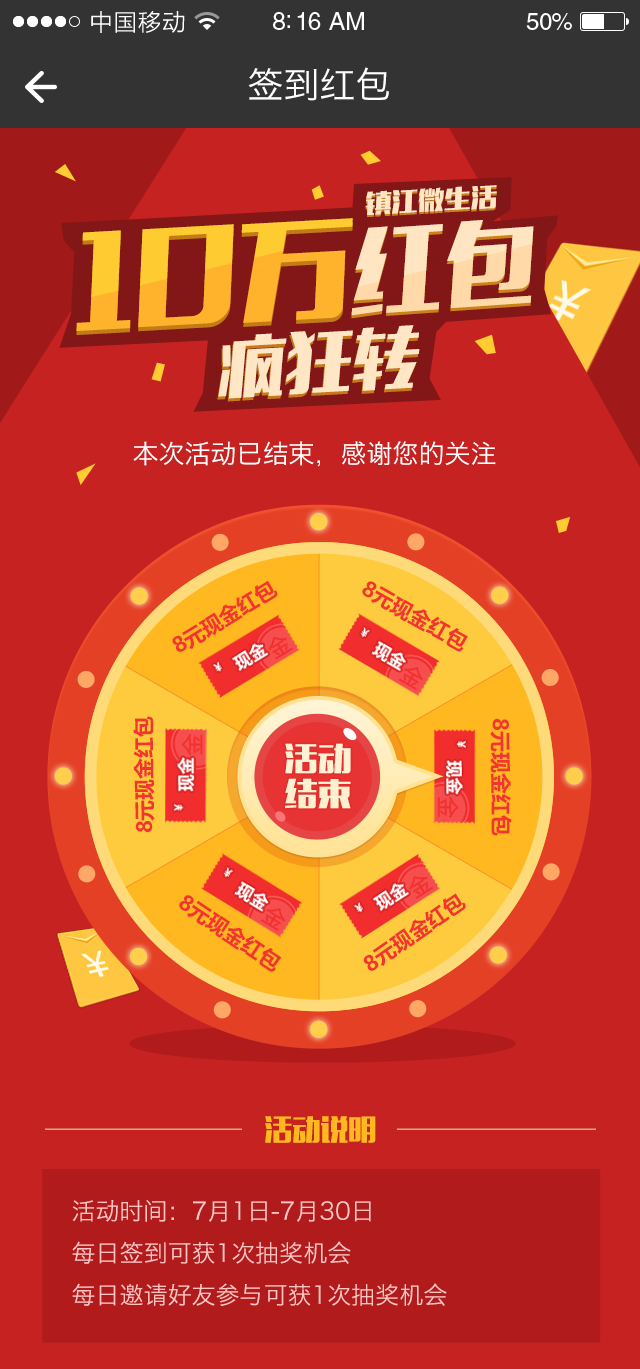
<style>
.page{position:relative;width:640px;height:1369px;background:#c72222}
.page>*{position:absolute;margin:0}
.t1{font:23px "STHeitiSC-Light";letter-spacing:-0.02em;color:#ffffff}
.t2{font:25px "HelveticaLTStd-Roman";letter-spacing:-0.02em;color:#ffffff}
.t3{font:24px "HelveticaLTStd-Roman";letter-spacing:-0.02em;color:#ffffff}
.t4{font:36px "HiraginoSansGB-W3";color:#ffffff}
.t5{font:24.6px "MFLiHei_Noncommercial-Regular";color:#ffe7c6;scale:1.08 1}
.t6{font:24.6px "MFLiHei_Noncommercial-Regular";scale:1.08 1}
.t7{font:108px "MFLiHei_Noncommercial-Regular";scale:1.08 1}
.t8{font:92.4px "MFLiHei_Noncommercial-Regular"}
.t9{font:66.7px "MFLiHei_Noncommercial-Regular";color:#ffe7c5}
.t10{font:26px "HiraginoSansGB-W3";color:#ffffff}
.t11{font:21px "MicrosoftYaHeiUI-Bold";color:#f3352f}
.t12{font:31.2px/35px "MFLiHei_Noncommercial-Regular";color:#fff0d1;scale:1.08 1}
.t13{font:28px "MFLiHei_Noncommercial-Regular";color:#ffb820}
.t14{font:24px "HiraginoSansGB-W3";color:#ffc5c5}
</style>
<div class="page">
<p class="t1" style="left:91px;top:11px;width:94px;height:22px">中国移动</p>
<p class="t2" style="left:273px;top:12px;width:91px;height:18px">8:16 AM</p>
<p class="t3" style="left:526px;top:13px;width:46px;height:17px">50%</p>
<p class="t4" style="left:248px;top:67px;width:141px;height:34px">签到红包</p>
<p class="t5" style="left:365px;top:185px;width:132px;height:31px;rotate:-3deg">镇江微生活</p>
<p class="t6" style="left:365px;top:187px;width:132px;height:31px;rotate:-3deg">镇江微生活</p>
<p class="t7" style="left:76px;top:222px;width:277px;height:113px;rotate:-3deg">10万</p>
<p class="t7" style="left:76px;top:218px;width:277px;height:113px;rotate:-3deg">10万</p>
<p class="t8" style="left:351px;top:220px;width:183px;height:96px;rotate:-4deg">红包</p>
<p class="t8" style="left:351px;top:223px;width:183px;height:96px;rotate:-4deg">红包</p>
<p class="t9" style="left:217px;top:328px;width:202px;height:74px;rotate:-3deg">疯狂转</p>
<p class="t9" style="left:218px;top:325px;width:202px;height:74px;rotate:-3deg">疯狂转</p>
<p class="t10" style="left:133px;top:441px;width:363px;height:26px">本次活动已结束，感谢您的关注</p>
<p class="t11" style="left:172px;top:580px;width:106px;height:72px;rotate:-32deg">8元现金红包</p>
<p class="t11" style="left:362px;top:581px;width:106px;height:71px;rotate:29deg">8元现金红包</p>
<p class="t11" style="left:133px;top:716px;width:22px;height:117px;rotate:-91deg">8元现金红包</p>
<p class="t11" style="left:490px;top:718px;width:22px;height:118px;rotate:90deg">8元现金红包</p>
<p class="t12" style="left:285px;top:743px;width:66px;height:66px">活动<br>结束</p>
<p class="t11" style="left:363px;top:893px;width:103px;height:78px;rotate:-35deg">8元现金红包</p>
<p class="t11" style="left:179px;top:895px;width:103px;height:77px;rotate:34deg">8元现金红包</p>
<p class="t13" style="left:265px;top:1116px;width:111px;height:27px">活动说明</p>
<p class="t14" style="left:72px;top:1200px;width:375px;height:106px">活动时间：7月1日-7月30日<br>每日签到可获1次抽奖机会<br>每日邀请好友参与可获1次抽奖机会</p>
</div>
